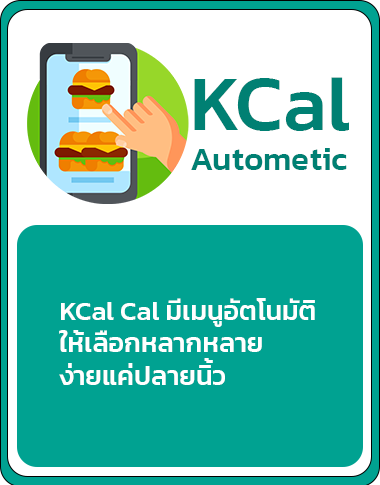
<style>
.page{position:relative;width:380px;height:485px;background:#00a291}
.page>*{position:absolute;margin:0}
.t1{font:33.3px "Kanit-Medium";color:#008073}
.t2{font:79.2px "Kanit-Medium";color:#008073}
.t3{font:27px "Kanit-Medium";color:#ffffff}
</style>
<div class="page">
<p class="t1" style="left:191px;top:77px;width:158px;height:93px"><span class="t2">KCal<br></span>Autometic</p>
<p class="t3" style="left:59px;top:298px;width:256px;height:87px">KCal Cal มีเมนูอัตโนมัติ <br>ให้เลือกหลากหลาย <br>ง่ายแค่ปลายนิ้ว</p>
</div>
